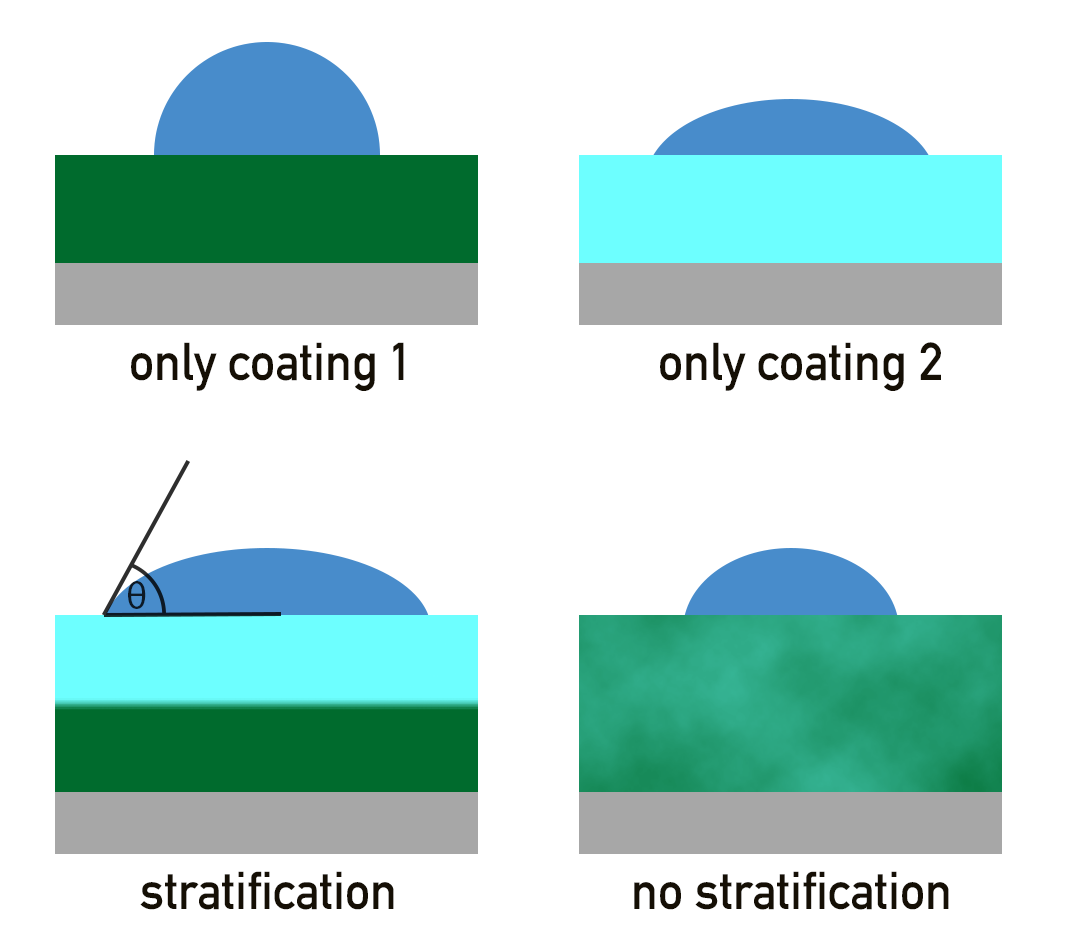
<style>
.page{position:relative;width:1090px;height:946px;background:#ffffff}
.page>*{position:absolute;margin:0}
.t1{font:52.5px "DIN-1451-Mittelschrift-Regular";color:#150f05;scale:0.95 1}
.t2{font:38.3px "MyriadPro-Regular";color:#0d1925;scale:0.95 1}
</style>
<div class="page">
<p class="t1" style="left:131px;top:342px;width:273px;height:49px">only coating 1</p>
<p class="t1" style="left:660px;top:342px;width:281px;height:49px">only coating 2</p>
<p class="t2" style="left:128px;top:581px;width:18px;height:28px">θ</p>
<p class="t1" style="left:140px;top:871px;width:254px;height:39px">stratification</p>
<p class="t1" style="left:634px;top:871px;width:315px;height:39px">no stratification</p>
</div>
